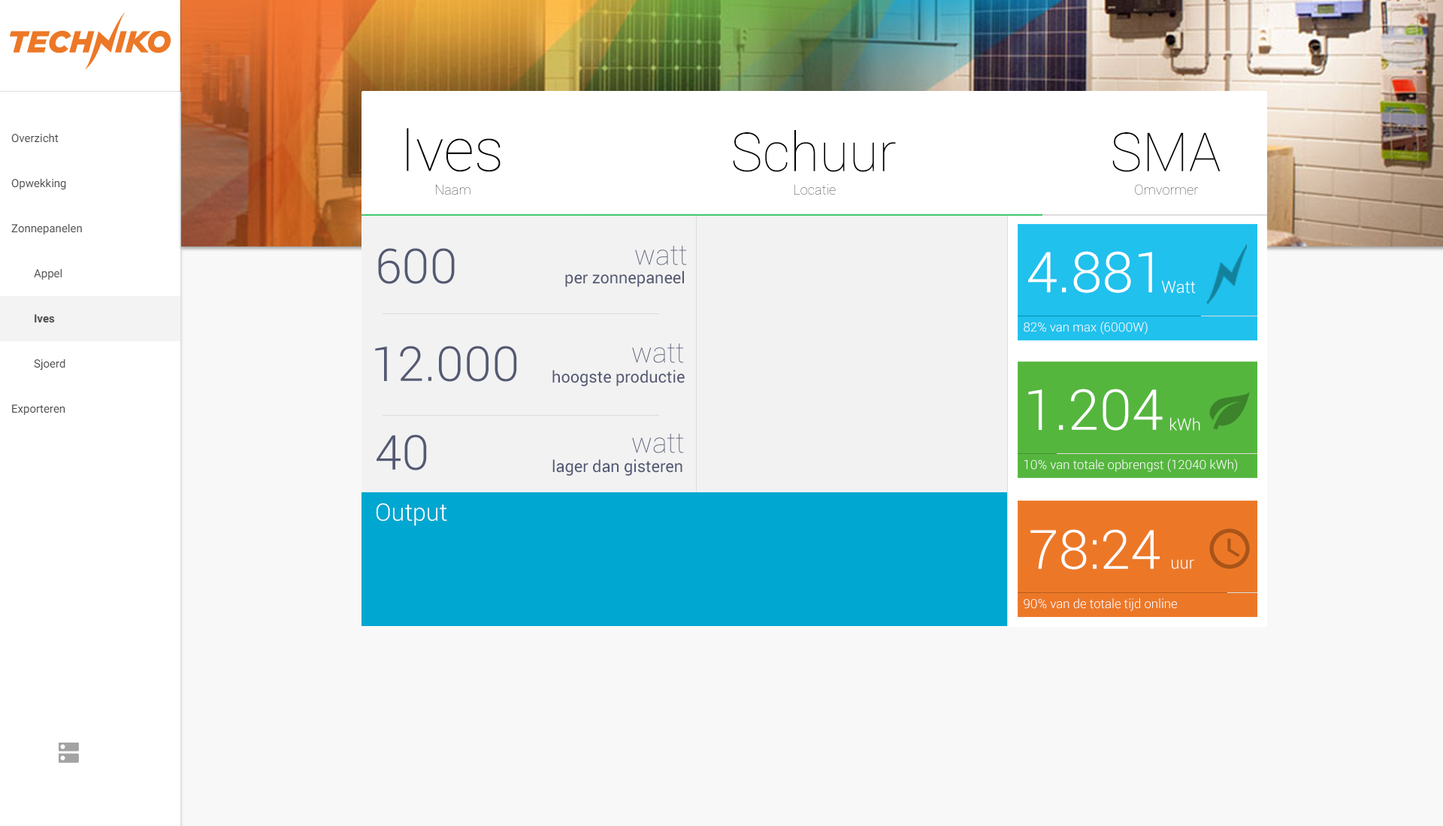
<style>
.page{position:relative;width:1443px;height:826px;background:#f8f8f8}
.page>*{position:absolute;margin:0}
.t1{font:60.1px "Roboto-Thin";color:#000000}
.t2{font:53.9px "Roboto-Thin";color:#000000}
.t3{font:13.8px "Roboto-Thin"}
.t4{font:27.9px "Roboto-Thin";color:#545973}
.t5{font:48.1px "Roboto-Light";color:#545973}
.t6{font:56.4px "Roboto-Light";color:#ffffff}
.t7{font:16.3px "Roboto-Regular";color:#545973}
.t8{font:16.6px "Roboto-Light";color:#ffffff}
.t9{font:12.6px "Roboto-Light";color:#ffffff}
.t10{font:24.1px "Roboto-Light";color:#ffffff}
.t11{font:54.4px "Roboto-Light";color:#ffffff}
</style>
<div class="page">
<p class="t1" style="left:407px;top:128px;width:94px;height:44px">Ives</p>
<p class="t2" style="left:733px;top:130px;width:163px;height:42px">Schuur</p>
<p class="t2" style="left:1113px;top:132px;width:108px;height:40px">SMA</p>
<p class="t3" style="left:436px;top:184px;width:35px;height:11px">Naam</p>
<p class="t3" style="left:795px;top:184px;width:41px;height:11px">Locatie</p>
<p class="t3" style="left:1135px;top:184px;width:63px;height:11px">Omvormer</p>
<p class="t4" style="left:635px;top:246px;width:52px;height:19px">watt</p>
<p class="t5" style="left:378px;top:248px;width:77px;height:36px">600</p>
<p class="t6" style="left:1028px;top:251px;width:124px;height:42px">4.881</p>
<p class="t7" style="left:565px;top:271px;width:119px;height:16px">per zonnepaneel</p>
<p class="t8" style="left:1161px;top:280px;width:35px;height:13px">Watt</p>
<p class="t9" style="left:1024px;top:321px;width:124px;height:14px">82% van max (6000W)</p>
<p class="t5" style="left:375px;top:346px;width:142px;height:36px">12.000</p>
<p class="t4" style="left:632px;top:344px;width:52px;height:19px">watt</p>
<p class="t7" style="left:553px;top:370px;width:132px;height:16px">hoogste productie</p>
<p class="t6" style="left:1028px;top:389px;width:135px;height:42px">1.204</p>
<p class="t8" style="left:1170px;top:417px;width:31px;height:14px">kWh</p>
<p class="t5" style="left:377px;top:435px;width:50px;height:36px">40</p>
<p class="t4" style="left:632px;top:434px;width:52px;height:19px">watt</p>
<p class="t7" style="left:553px;top:459px;width:130px;height:17px">lager dan gisteren</p>
<p class="t9" style="left:1025px;top:459px;width:212px;height:13px">10% van totale opbrengst (12040 kWh)</p>
<p class="t10" style="left:377px;top:503px;width:70px;height:23px">Output</p>
<p class="t11" style="left:1031px;top:529px;width:129px;height:41px">78:24</p>
<p class="t8" style="left:1172px;top:559px;width:23px;height:10px">uur</p>
<p class="t9" style="left:1024px;top:598px;width:153px;height:13px">90% van de totale tijd online</p>
</div>
